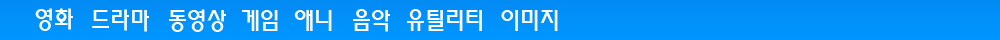
<style>
.page{position:relative;width:1000px;height:40px}
.page>*{position:absolute;margin:0}
.t1{font:24px "MoeumTR-HM";color:#ffffff}
</style>
<div class="page">
<p class="t1" style="left:35px;top:8px;width:38px;height:23px">영화</p>
<p class="t1" style="left:92px;top:9px;width:57px;height:23px">드라마</p>
<p class="t1" style="left:169px;top:9px;width:57px;height:23px">동영상</p>
<p class="t1" style="left:242px;top:10px;width:36px;height:21px">게임</p>
<p class="t1" style="left:294px;top:10px;width:38px;height:21px">애니</p>
<p class="t1" style="left:353px;top:9px;width:37px;height:23px">음악</p>
<p class="t1" style="left:407px;top:9px;width:75px;height:22px">유틸리티</p>
<p class="t1" style="left:501px;top:10px;width:57px;height:21px">이미지</p>
</div>
